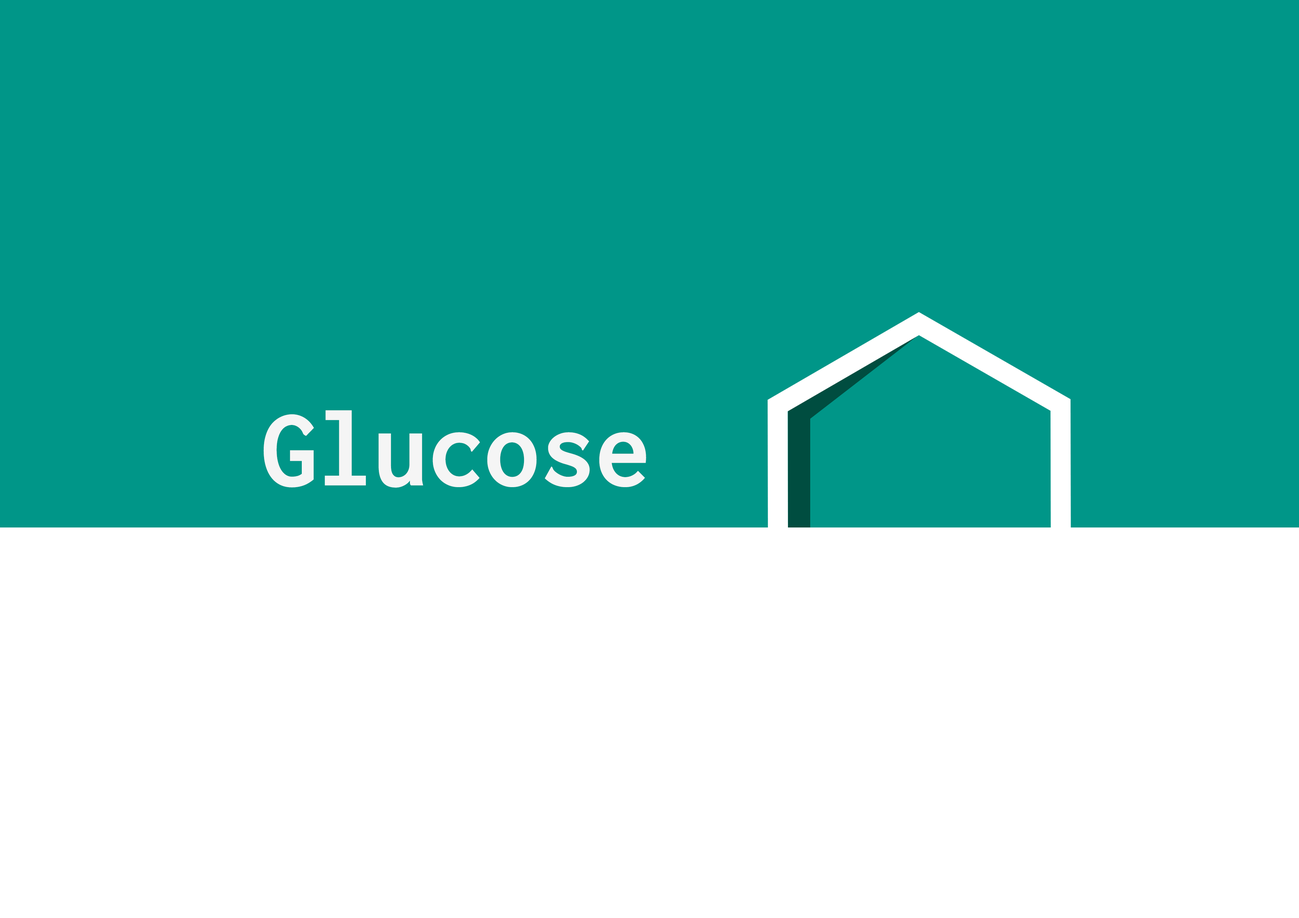
<style>
.page{position:relative;width:1299px;height:918px;background:#009688}
.page>*{position:absolute;margin:0}
.t1{font:111.1px "Inconsolata-Bold";color:#f5f5f5}
</style>
<div class="page">
<p class="t1" style="left:264px;top:410px;width:382px;height:78px">Glucose</p>
</div>
